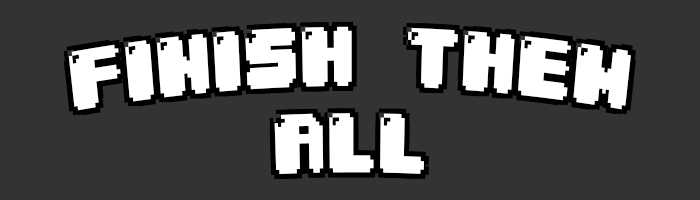
<style>
.page{position:relative;width:700px;height:200px;background:#333333}
.page>*{position:absolute;margin:0}
.t1{font:72px "04b30";color:#ffffff;scale:0.79 1}
</style>
<div class="page">
<p class="t1" style="left:63px;top:21px;width:563px;height:149px;text-align:center">FINISH THEM<br>ALL</p>
<p class="t1" style="left:68px;top:26px;width:563px;height:149px;text-align:center">FINISH THEM<br>ALL</p>
<p class="t1" style="left:73px;top:21px;width:563px;height:149px;text-align:center">FINISH THEM<br>ALL</p>
<p class="t1" style="left:63px;top:31px;width:563px;height:149px;text-align:center">FINISH THEM<br>ALL</p>
<p class="t1" style="left:68px;top:31px;width:563px;height:149px;text-align:center">FINISH THEM<br>ALL</p>
<p class="t1" style="left:73px;top:31px;width:563px;height:149px;text-align:center">FINISH THEM<br>ALL</p>
</div>
